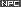
<style>
.page{position:relative;width:21px;height:7px;background:#4e4e4e}
.page>*{position:absolute;margin:0}
.t1{font:8px "5x5-Pixel";color:#f8fff9}
</style>
<div class="page">
<p class="t1" style="left:2px;top:1px;width:17px;height:5px">npc</p>
</div>
